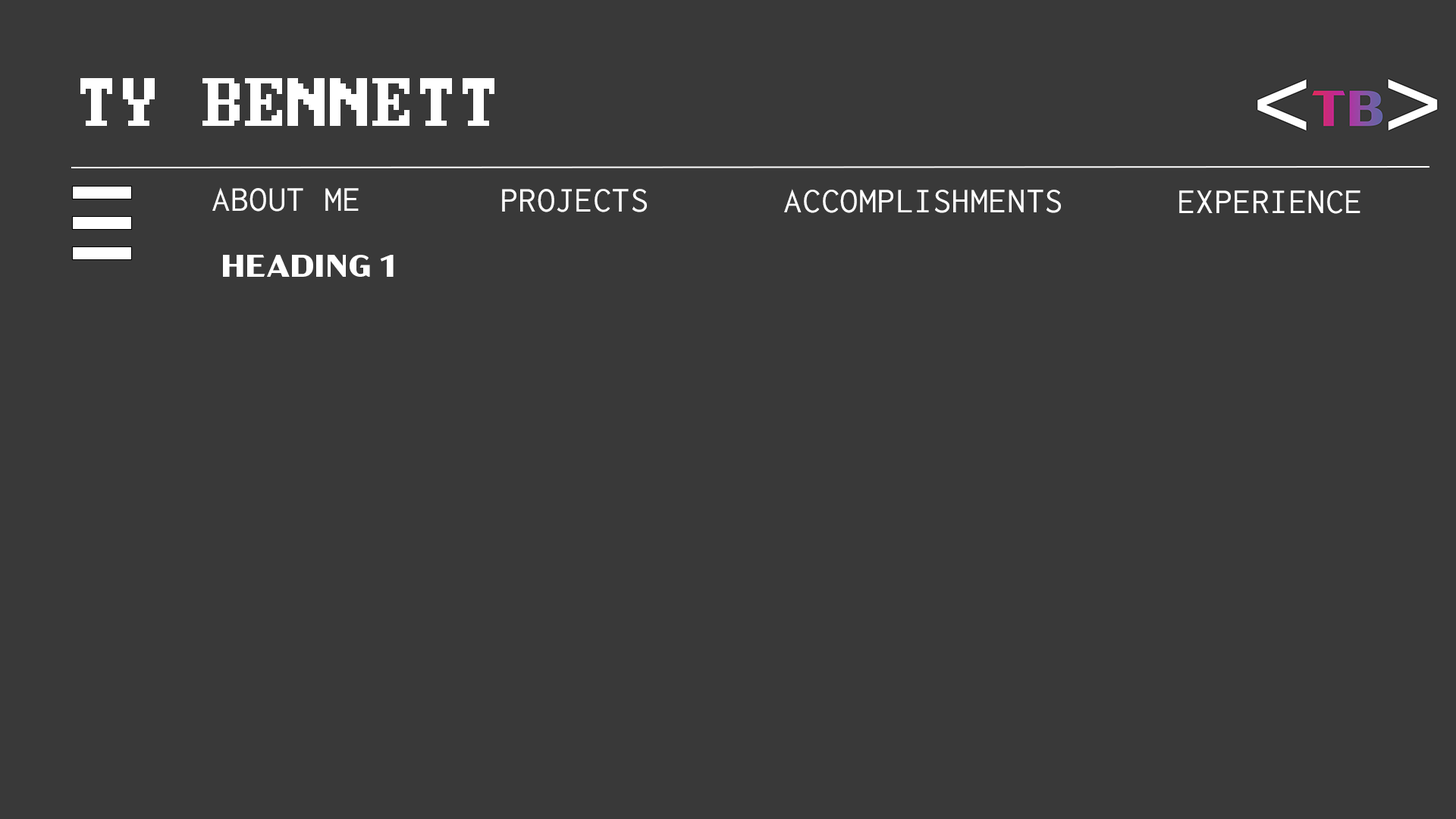
<style>
.page{position:relative;width:1456px;height:819px;background:#393939}
.page>*{position:absolute;margin:0}
.t1{font:63.7px "BigBlueTerm437NFM";color:#ffffff;text-transform:uppercase}
.t2{font:31.1px "InconsolataLGCNF";color:#ffffff;text-transform:uppercase}
.t3{font:31.1px "AcmeGothic-WideBold";color:#ffffff;text-transform:uppercase}
</style>
<div class="page">
<p class="t1" style="left:80px;top:78px;width:414px;height:48px">Ty Bennett</p>
<p class="t2" style="left:212px;top:187px;width:147px;height:25px">About me</p>
<p class="t2" style="left:502px;top:189px;width:145px;height:23px">Projects</p>
<p class="t2" style="left:784px;top:189px;width:277px;height:24px">Accomplishments</p>
<p class="t2" style="left:1179px;top:190px;width:181px;height:24px">Experience</p>
<p class="t3" style="left:223px;top:255px;width:171px;height:22px">heading 1</p>
</div>
